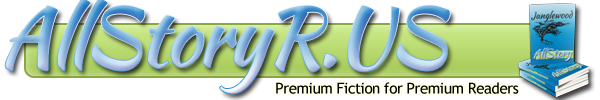
<style>
.page{position:relative;width:600px;height:100px;background:#ffffff}
.page>*{position:absolute;margin:0}
.t1{font:80px "KaushanScript-Regular";letter-spacing:-0.025em}
.t2{font:15px "TrebuchetMS";letter-spacing:-0.025em;color:#000000}
</style>
<div class="page">
<p class="t1" style="left:5px;top:0px;width:445px;height:94px">AllStoryR.US</p>
<p class="t2" style="left:276px;top:82px;width:243px;height:12px">Premium Fiction for Premium Readers</p>
</div>
